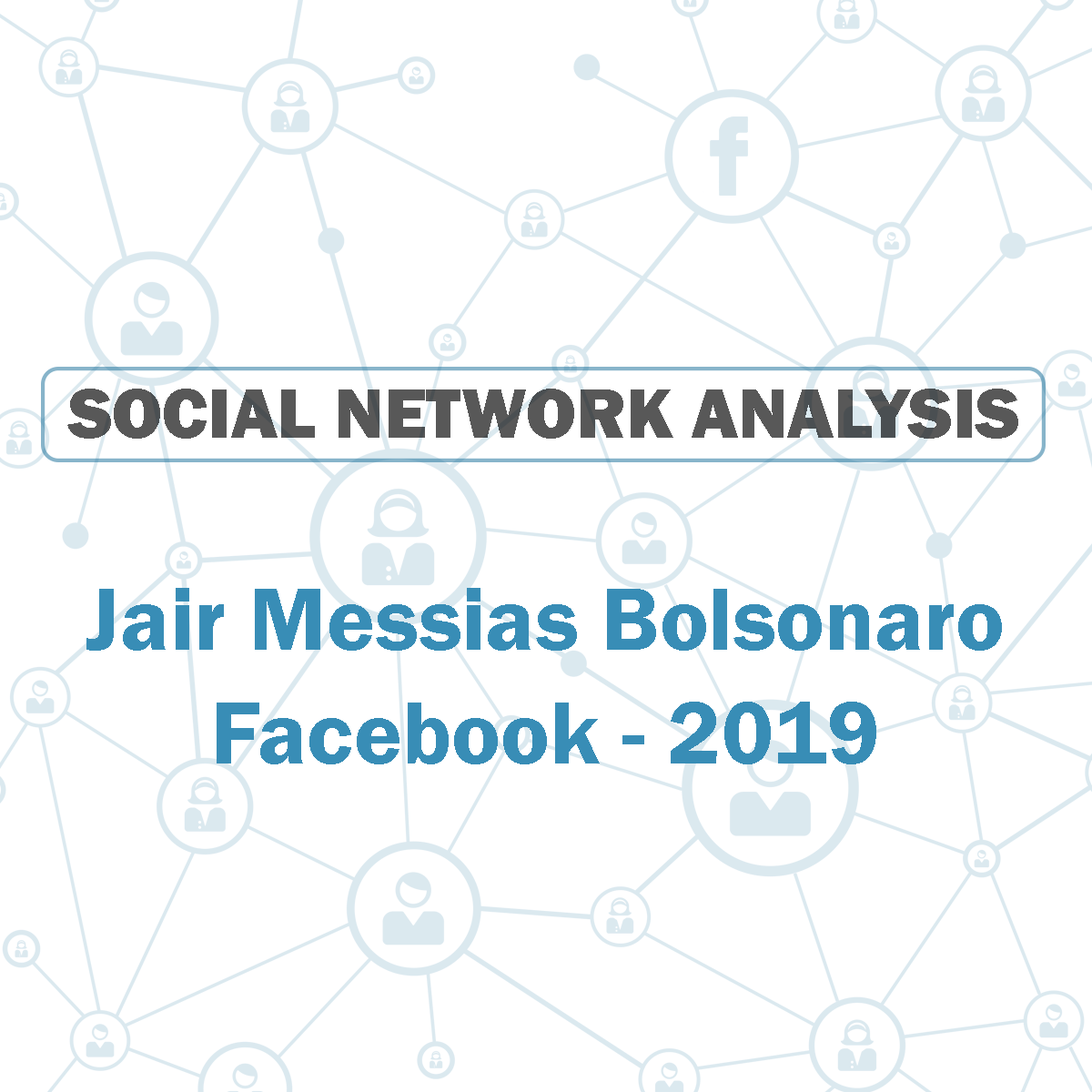
<style>
.page{position:relative;width:1092px;height:1092px;background:#ffffff}
.page>*{position:absolute;margin:0}
.t1{font:72.2px "FranklinGothic-Heavy";color:#585858}
.t2{font:91px/113.7px "FranklinGothic-Demi";color:#388db6}
</style>
<div class="page">
<p class="t1" style="left:67px;top:389px;width:951px;height:50px">SOCIAL NETWORK ANALYSIS</p>
<p class="t2" style="left:86px;top:588px;width:916px;height:176px;text-align:center">Jair Messias Bolsonaro<br>Facebook - 2019</p>
</div>
